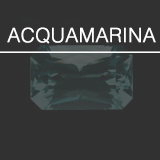
<style>
.page{position:relative;width:160px;height:160px;background:#313131}
.page>*{position:absolute;margin:0}
.t1{font:19.8px "Helvetica-Light";color:#ffffff;font-weight:bold}
</style>
<div class="page">
<p class="t1" style="left:7px;top:27px;width:149px;height:17px">ACQUAMARINA</p>
</div>
